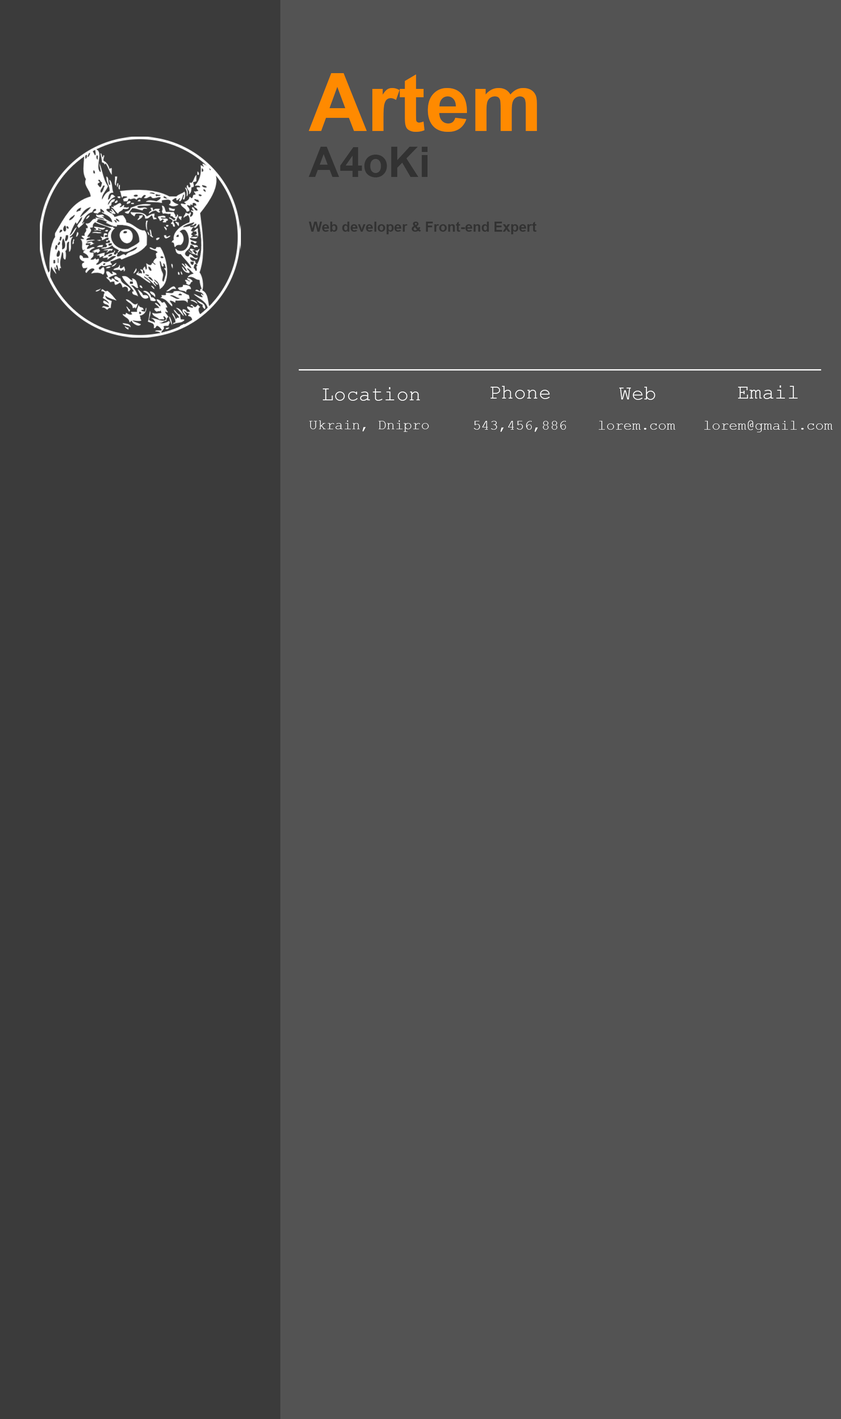
<style>
.page{position:relative;width:841px;height:1419px;background:#535353}
.page>*{position:absolute;margin:0}
.t1{font:80.7px "Arial-BoldMT";color:#ff8a00}
.t2{font:42px "Arial-BoldMT";color:#323232}
.t3{font:13.8px "Arial-BoldMT";color:#323232}
.t4{font:20.8px "CourierNewPSMT";color:#ffffff}
.t5{font:14.3px "CourierNewPSMT";color:#ffffff}
</style>
<div class="page">
<p class="t1" style="left:309px;top:73px;width:228px;height:59px">Artem</p>
<p class="t2" style="left:308px;top:147px;width:119px;height:30px">A4oKi</p>
<p class="t3" style="left:309px;top:222px;width:227px;height:12px">Web developer &amp; Front-end Expert</p>
<p class="t4" style="left:323px;top:387px;width:97px;height:14px">Location</p>
<p class="t4" style="left:490px;top:386px;width:59px;height:13px">Phone</p>
<p class="t4" style="left:619px;top:387px;width:36px;height:13px">Web</p>
<p class="t4" style="left:738px;top:385px;width:59px;height:14px">Email</p>
<p class="t5" style="left:309px;top:420px;width:120px;height:12px">Ukrain, Dnipro</p>
<p class="t5" style="left:474px;top:421px;width:92px;height:11px">543,456,886</p>
<p class="t5" style="left:598px;top:421px;width:77px;height:8px">lorem.com</p>
<p class="t5" style="left:704px;top:420px;width:128px;height:12px">lorem@gmail.com</p>
</div>
